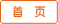
<style>
.page{position:relative;width:58px;height:24px;background:#ffffff}
.page>*{position:absolute;margin:0}
.t1{font:12px "FZY3JW--GB1-0";letter-spacing:0.2em;color:#e56617;scale:0.9 1}
</style>
<div class="page">
<p class="t1" style="left:12px;top:5px;width:34px;height:13px">首  页</p>
</div>
